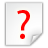
<style>
.page{position:relative;width:48px;height:48px}
.page>*{position:absolute;margin:0}
.t1{font:42px "MyriadPro-Regular";color:#ff0000}
</style>
<div class="page">
<p class="t1" style="left:17px;top:10px;width:13px;height:29px">?</p>
</div>
